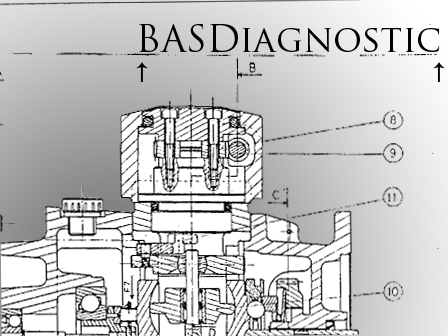
<style>
.page{position:relative;width:448px;height:336px}
.page>*{position:absolute;margin:0}
.t1{font:36px "TrajanPro-Regular";color:#000000}
</style>
<div class="page">
<p class="t1" style="left:139px;top:23px;width:301px;height:30px">BASDiagnostic</p>
</div>
